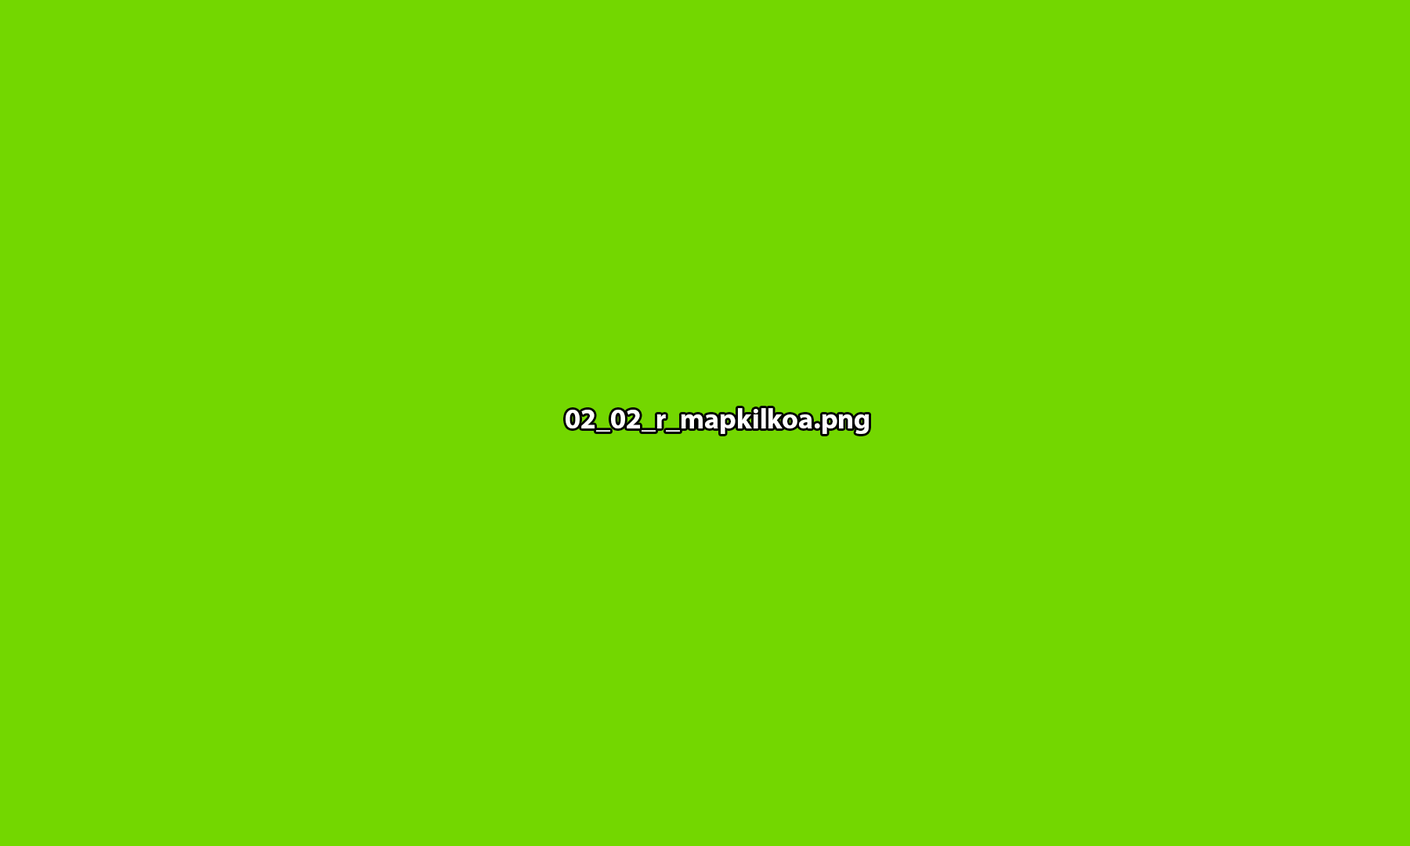
<style>
.page{position:relative;width:1410px;height:846px;background:#73d700}
.page>*{position:absolute;margin:0}
.t1{font:28.1px "MyriadPro-Bold";color:#ffffff}
</style>
<div class="page">
<p class="t1" style="left:565px;top:408px;width:304px;height:26px">02_02_r_mapkilkoa.png</p>
</div>
